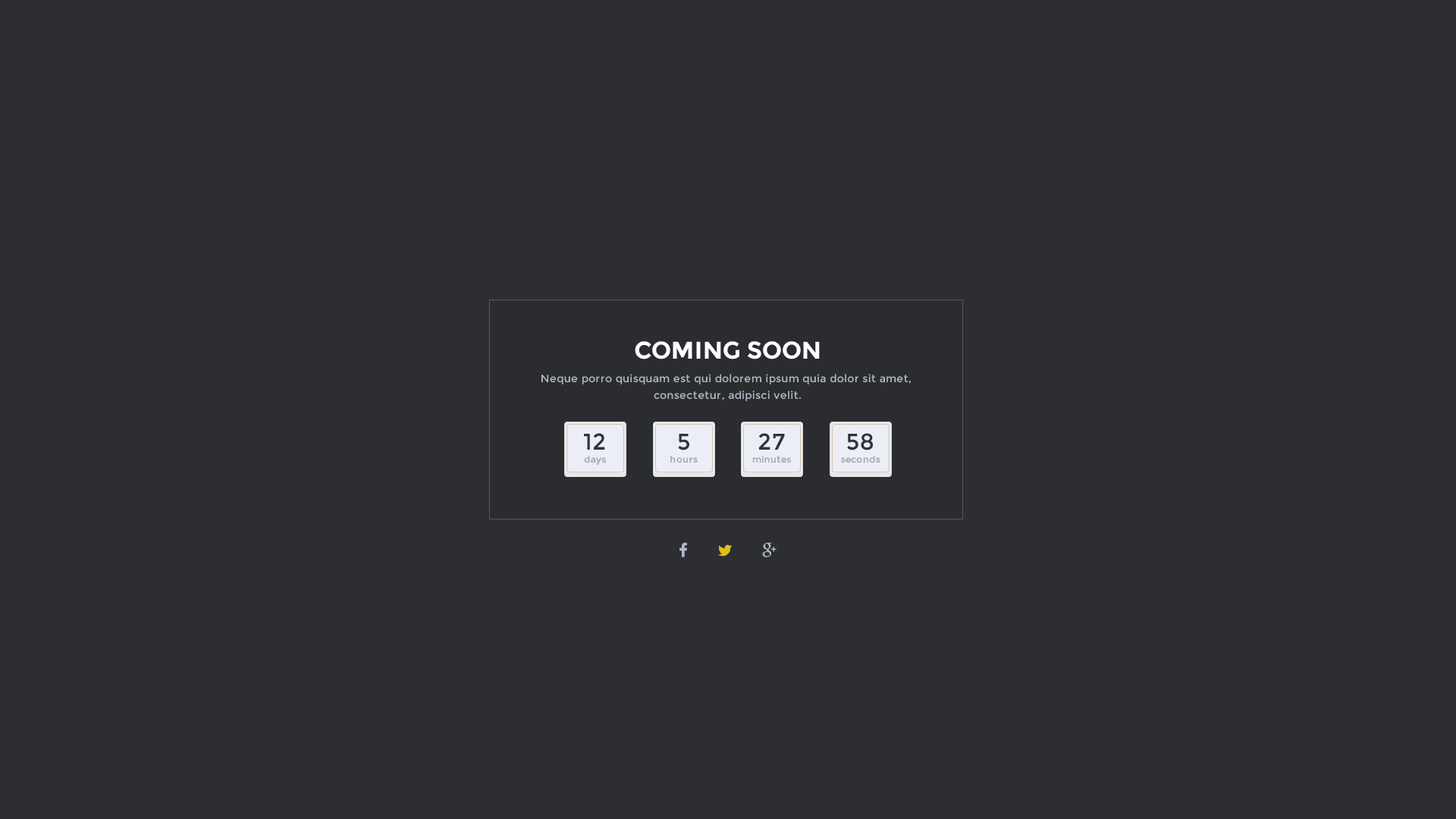
<style>
.page{position:relative;width:1456px;height:819px;background:#2d2e32}
.page>*{position:absolute;margin:0}
.t1{font:24.2px "Montserrat-Bold";color:#ffffff;text-transform:uppercase}
.t2{font:10.6px/16.6px "Montserrat-Regular";letter-spacing:0.025em;color:#b3b8c5}
.t3{font:22.7px "Montserrat-Regular";letter-spacing:0.03em;color:#30323e}
.t4{font:9.1px "Montserrat-Regular";letter-spacing:0.03em;color:#a4a6ab}
</style>
<div class="page">
<p class="t1" style="left:635px;top:341px;width:185px;height:18px">coming soon</p>
<p class="t2" style="left:541px;top:374px;width:370px;height:27px;text-align:center">Neque porro quisquam est qui dolorem ipsum quia dolor sit amet, <br>consectetur, adipisci velit.</p>
<p class="t3" style="left:584px;top:433px;width:21px;height:17px">12</p>
<p class="t3" style="left:678px;top:434px;width:11px;height:16px">5</p>
<p class="t3" style="left:758px;top:433px;width:27px;height:17px">27</p>
<p class="t3" style="left:847px;top:433px;width:26px;height:17px">58</p>
<p class="t4" style="left:584px;top:455px;width:22px;height:10px">days</p>
<p class="t4" style="left:670px;top:455px;width:28px;height:8px">hours</p>
<p class="t4" style="left:752px;top:455px;width:39px;height:8px">minutes</p>
<p class="t4" style="left:841px;top:455px;width:39px;height:8px">seconds</p>
</div>
